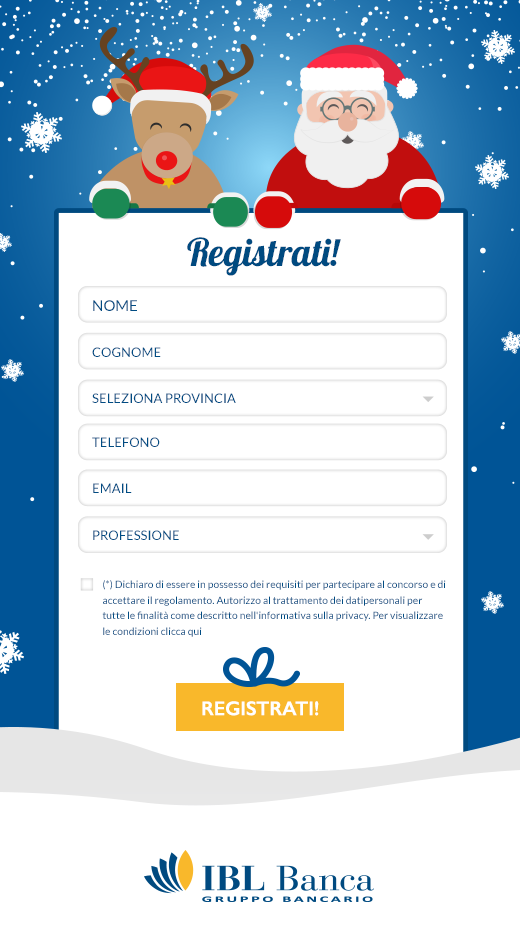
<style>
.page{position:relative;width:520px;height:942px;background:#ffffff}
.page>*{position:absolute;margin:0}
.t1{font:38.3px "Lobster";color:#004a80}
.t2{font:15px "Lato-Regular";color:#004c83}
.t3{font:13.1px "Lato-Regular";color:#004c83}
.t4{font:10.3px/16px "Lato-Regular";color:#004c83}
.t5{font:20px "GillSans-SemiBold";color:#ffffff;text-transform:uppercase}
</style>
<div class="page">
<p class="t1" style="left:187px;top:237px;width:154px;height:39px">Registrati!</p>
<p class="t2" style="left:93px;top:300px;width:44px;height:11px">NOME</p>
<p class="t3" style="left:92px;top:347px;width:69px;height:10px">COGNOME</p>
<p class="t3" style="left:92px;top:393px;width:144px;height:10px">SELEZIONA PROVINCIA</p>
<p class="t3" style="left:92px;top:437px;width:68px;height:10px">TELEFONO</p>
<p class="t3" style="left:93px;top:483px;width:39px;height:10px">EMAIL</p>
<p class="t3" style="left:93px;top:530px;width:86px;height:10px">PROFESSIONE</p>
<p class="t4" style="left:102px;top:580px;width:344px;height:57px">(*) Dichiaro di essere in possesso dei requisiti per partecipare al concorso e di accettare il regolamento. Autorizzo al trattamento dei datipersonali per<br>tutte le finalità come descritto nell'informativa sulla privacy. Per visualizzare le condizioni clicca qui</p>
<p class="t5" style="left:202px;top:701px;width:117px;height:15px">REGISTRATI!</p>
</div>
